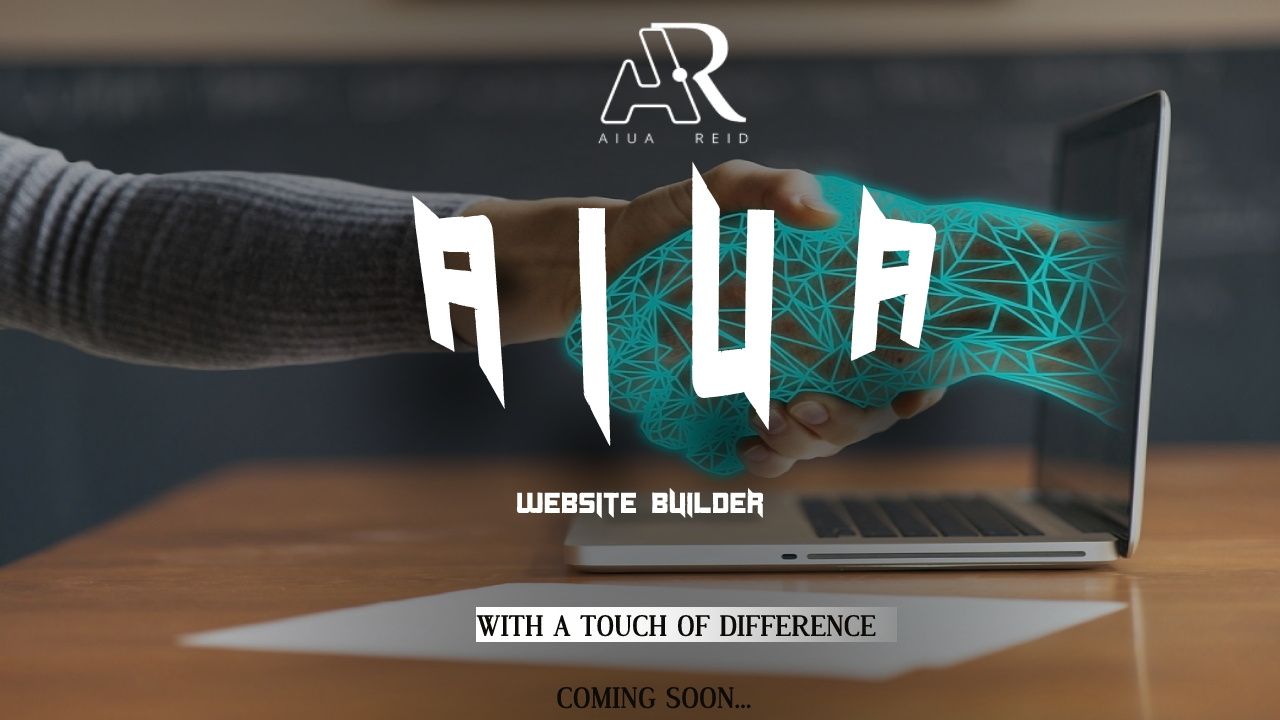
<style>
.page{position:relative;width:1280px;height:720px}
.page>*{position:absolute;margin:0}
.t1{font:150px "Duplexide";color:#ffffff}
.t2{font:29px "Duplexide";color:#ffffff}
.t3{font:29px "DustismoRoman-Bold";color:#0c0b07}
</style>
<div class="page">
<p class="t1" style="left:412px;top:161px;width:525px;height:286px;text-align:center">A I U A</p>
<p class="t2" style="left:517px;top:487px;width:246px;height:32px">WEBSITE BUILDER</p>
<p class="t3" style="left:476px;top:615px;width:400px;height:22px">WITH A TOUCH OF DIFFERENCE</p>
<p class="t3" style="left:557px;top:687px;width:194px;height:22px">COMING SOON...</p>
</div>
